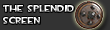
<style>
.page{position:relative;width:110px;height:30px;background:#333333}
.page>*{position:absolute;margin:0}
.t1{font:10px "TF2Build";color:#fefefe}
</style>
<div class="page">
<p class="t1" style="left:3px;top:5px;width:71px;height:19px">The SPLENDID<br>SCREEN</p>
</div>
